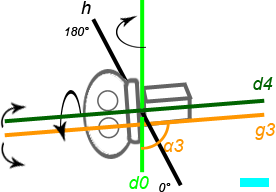
<style>
.page{position:relative;width:276px;height:192px;background:#ffffff}
.page>*{position:absolute;margin:0}
.t1{font:18px "Arial-ItalicMT";color:#000000}
.t2{font:12px "Arial-ItalicMT";color:#000000}
.t3{font:18px "Arial-ItalicMT";color:#006400}
.t4{font:18px "Arial-ItalicMT";color:#ff9600}
.t5{font:18px "Arial-ItalicMT";color:#00ff00}
</style>
<div class="page">
<p class="t1" style="left:81px;top:1px;width:10px;height:13px">h</p>
<p class="t2" style="left:65px;top:27px;width:24px;height:9px">180°</p>
<p class="t3" style="left:253px;top:77px;width:20px;height:13px">d4</p>
<p class="t4" style="left:255px;top:123px;width:21px;height:17px">g3</p>
<p class="t4" style="left:163px;top:139px;width:21px;height:13px">α3</p>
<p class="t5" style="left:129px;top:176px;width:20px;height:13px">d0</p>
<p class="t2" style="left:159px;top:183px;width:12px;height:9px">0°</p>
</div>
